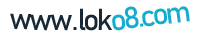
<style>
.page{position:relative;width:204px;height:38px;background:#ffffff}
.page>*{position:absolute;margin:0}
.t1{font:30px "Bahnschrift";letter-spacing:-0.1em;color:#14add0}
.t2{font:30px "Bahnschrift";letter-spacing:-0.1em;color:#172936}
</style>
<div class="page">
<p class="t1" style="left:112px;top:6px;width:78px;height:25px;rotate:-7deg">o8.com</p>
<p class="t2" style="left:10px;top:8px;width:102px;height:23px">www . lok</p>
</div>
